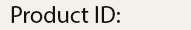
<style>
.page{position:relative;width:191px;height:30px;background:#f3f1e9}
.page>*{position:absolute;margin:0}
.t1{font:24px "MyriadPro-Regular";color:#111111}
</style>
<div class="page">
<p class="t1" style="left:11px;top:6px;width:109px;height:17px">Product ID:</p>
</div>
